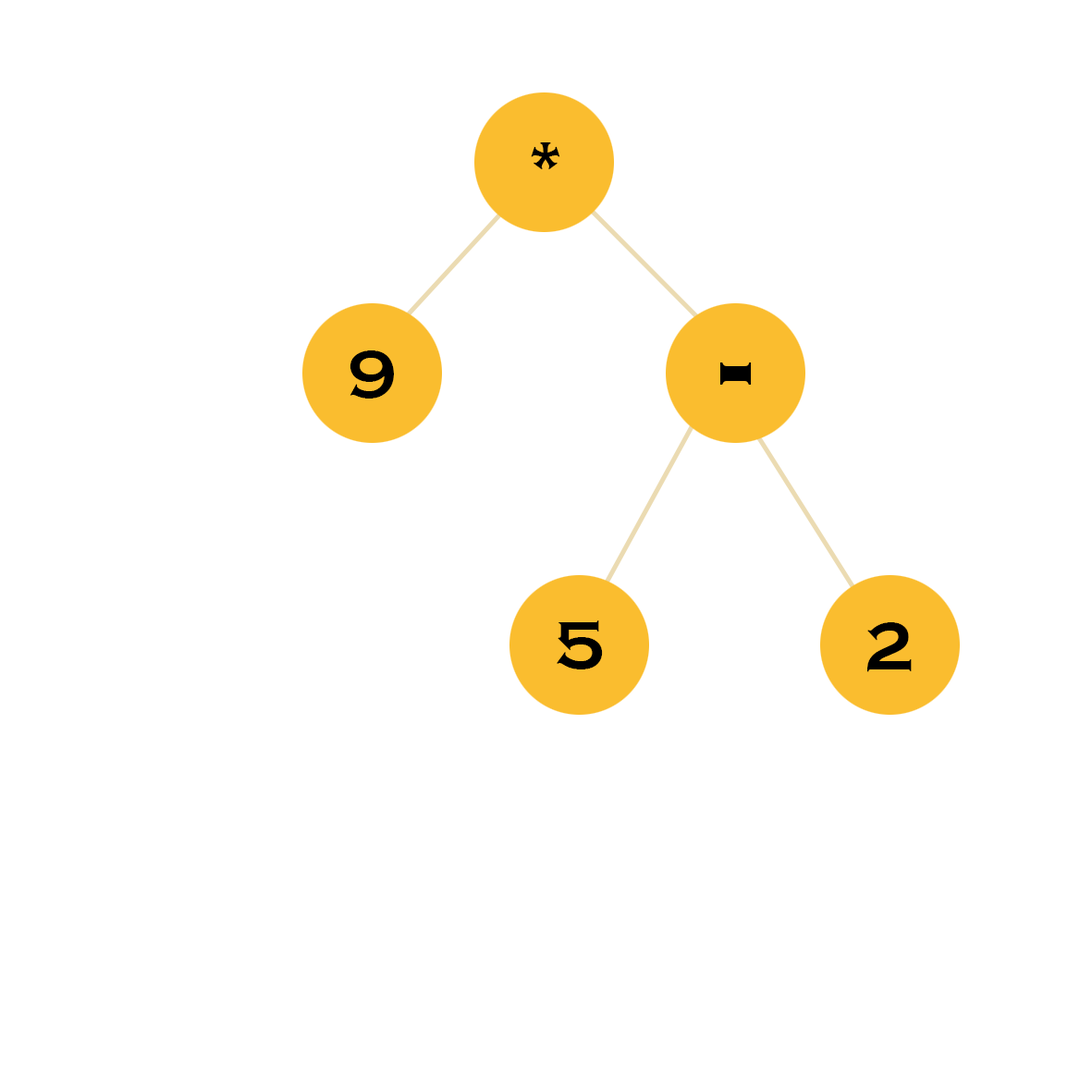
<style>
.page{position:relative;width:1092px;height:1092px;background:#ffffff}
.page>*{position:absolute;margin:0}
.t1{font:69.3px "CopperplateGothic-Bold";color:#000000}
.t2{font:138.7px "CopperplateGothic-Bold";color:#000000}
</style>
<div class="page">
<p class="t1" style="left:531px;top:142px;width:29px;height:28px">*</p>
<p class="t1" style="left:350px;top:350px;width:44px;height:49px">9</p>
<p class="t2" style="left:719px;top:362px;width:33px;height:23px">-</p>
<p class="t1" style="left:557px;top:620px;width:46px;height:49px">5</p>
<p class="t1" style="left:867px;top:622px;width:45px;height:50px">2</p>
</div>
